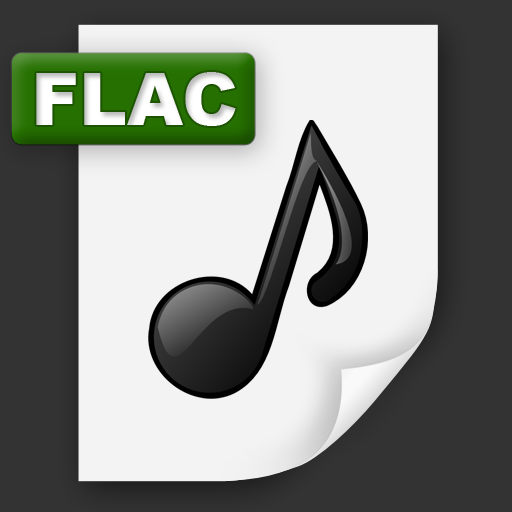
<style>
.page{position:relative;width:512px;height:512px;background:#f3f3f3}
.page>*{position:absolute;margin:0}
.t1{font:72px "Arial-Black";color:#ffffff}
</style>
<div class="page">
<p class="t1" style="left:36px;top:72px;width:200px;height:54px">FLAC</p>
</div>
